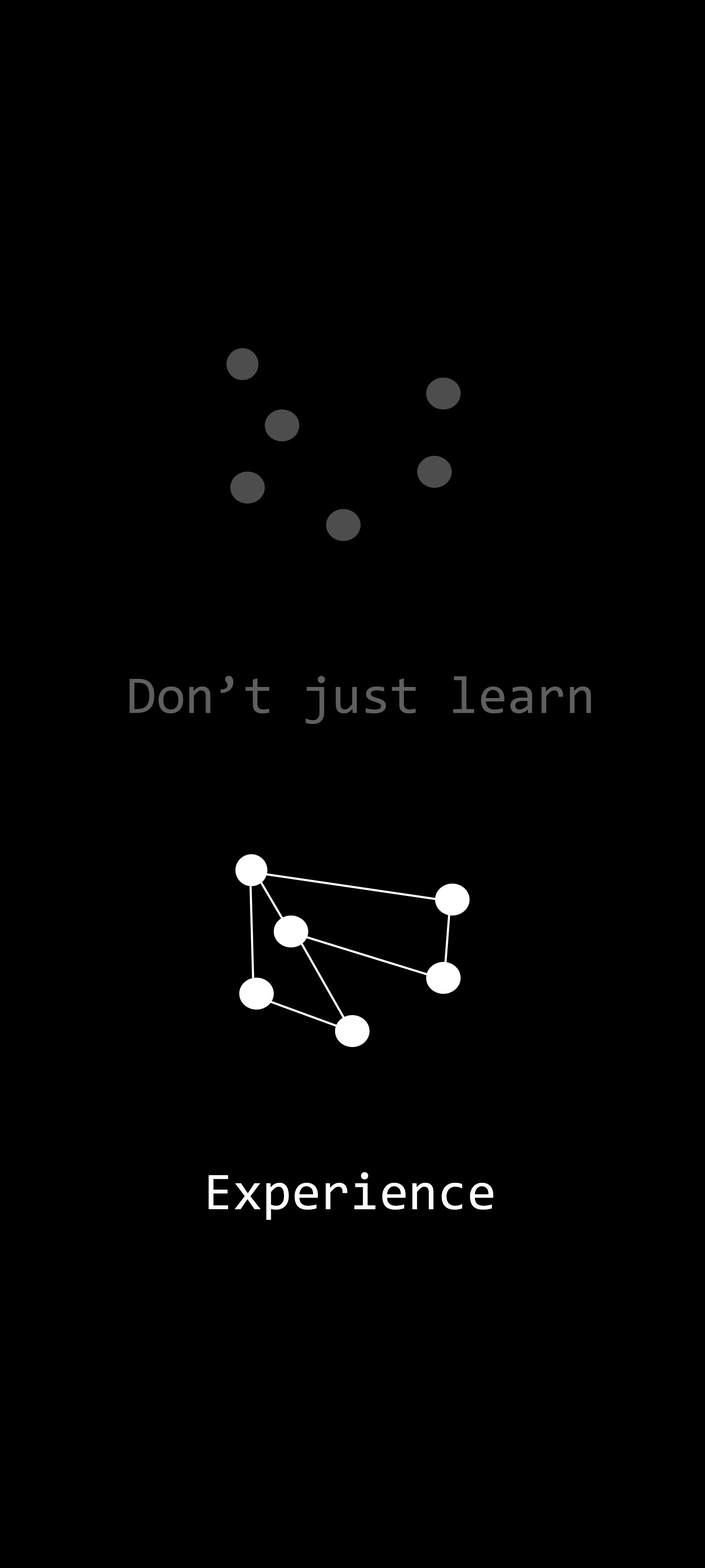
<style>
.page{position:relative;width:705px;height:1568px;background:#000000}
.page>*{position:absolute;margin:0}
.t1{font:53.2px "Consolas";color:#5f5f5f}
.t2{font:53.2px "Consolas";color:#ffffff}
</style>
<div class="page">
<p class="t1" style="left:129px;top:676px;width:462px;height:48px">Don’t just learn</p>
<p class="t2" style="left:209px;top:1172px;width:284px;height:48px">Experience</p>
</div>
